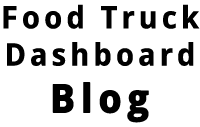
<style>
.page{position:relative;width:200px;height:127px;background:#ffffff}
.page>*{position:absolute;margin:0}
.t1{font:31px "DroidSans-Bold";letter-spacing:0.12em;color:#000000}
.t2{font:39px "DroidSans-Bold";letter-spacing:0.12em;color:#000000;font-weight:bold}
</style>
<div class="page">
<p class="t1" style="left:3px;top:4px;width:197px;height:119px;text-align:center">Food Truck Dashboard<br><span class="t2">Blog</span></p>
</div>
